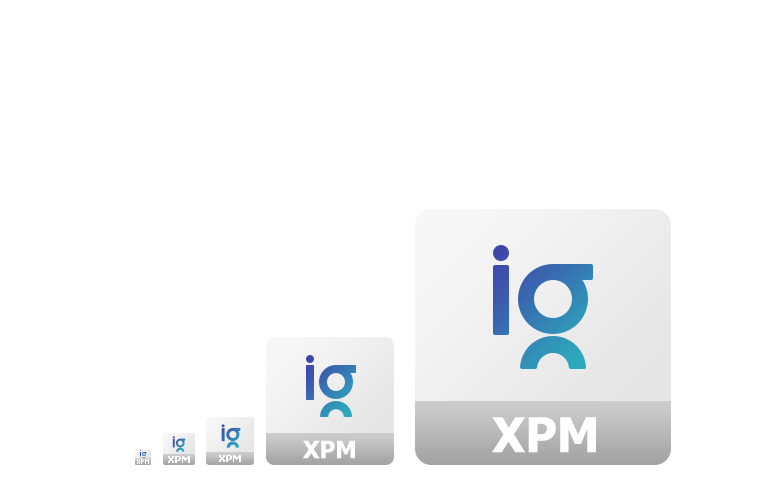
<style>
.page{position:relative;width:768px;height:480px;background:#ffffff}
.page>*{position:absolute;margin:0}
.t1{font:48px "Tahoma-Bold";color:#ffffff}
.t2{font:24px "Tahoma-Bold";color:#ffffff}
.t3{font:10px "Tahoma-Bold";color:#ffffff}
</style>
<div class="page">
<p class="t1" style="left:492px;top:417px;width:104px;height:36px">XPM</p>
<p class="t2" style="left:302px;top:440px;width:53px;height:19px">XPM</p>
<p class="t3" style="left:168px;top:456px;width:22px;height:7px">XPM</p>
<p class="t3" style="left:219px;top:455px;width:22px;height:7px">XPM</p>
</div>
